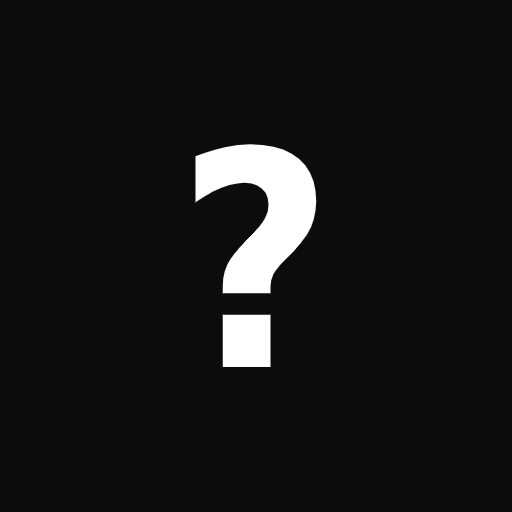
<style>
.page{position:relative;width:512px;height:512px;background:#0c0c0c}
.page>*{position:absolute;margin:0}
.t1{font:300px "DejaVuSansCondensed-Bold";color:#ffffff}
</style>
<div class="page">
<p class="t1" style="left:195px;top:144px;width:122px;height:223px">?</p>
</div>
